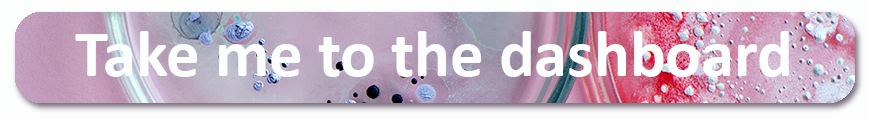
<style>
.page{position:relative;width:869px;height:119px;background:#fcfefe}
.page>*{position:absolute;margin:0}
.t1{font:66.7px "Calibri-Bold";color:#fcfefe}
</style>
<div class="page">
<p class="t1" style="left:75px;top:31px;width:714px;height:46px">Take me to the dashboard</p>
</div>
